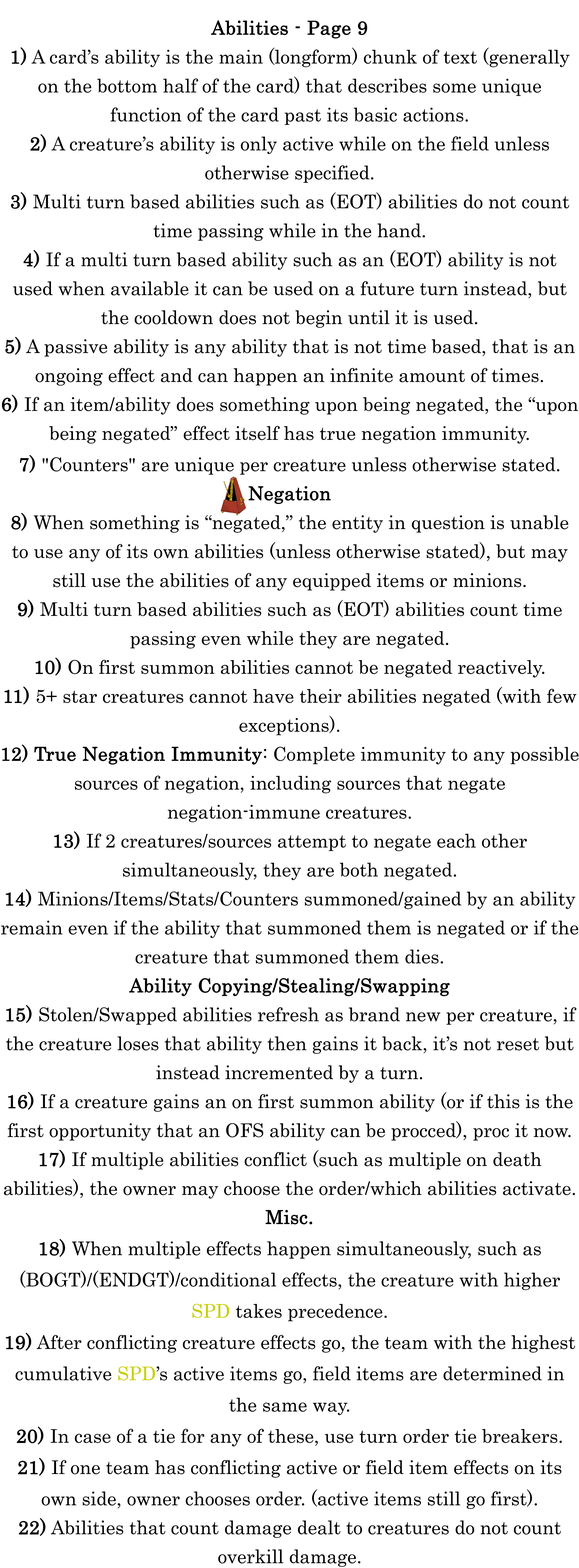
<style>
.page{position:relative;width:579px;height:1568px;background:#ffffff}
.page>*{position:absolute;margin:0}
.t1{font:32.2px/29px "Century";color:#000000}
.t2{font:32.2px/29px "Century";color:#000000;font-weight:bold}
.t3{font:32.2px/31.3px "Century";color:#000000}
.t4{font:32.2px/31.3px "Century";color:#c8cf00}
</style>
<div class="page">
<p class="t1" style="left:1px;top:20px;width:578px;height:1547px;text-align:center"><span class="t2">Abilities - Page 9<br>1)</span> A card’s ability is the main (longform) chunk of text (generally on the bottom half of the card) that describes some unique function of the card past its basic actions.<br><span class="t2">2)</span> A creature’s ability is only active while on the field unless otherwise specified.<br><span class="t2">3)</span> Multi turn based abilities such as (EOT) abilities do not count time passing while in the hand.<br><span class="t2">4)</span> If a multi turn based ability such as an (EOT) ability is not used when available it can be used on a future turn instead, but the cooldown does not begin until it is used.<br><span class="t2">5)</span> A passive ability is any ability that is not time based, that is an ongoing effect and can happen an infinite amount of times.<br><span class="t2">6)</span> If an item/ability does something upon being negated, the “upon being negated” effect itself has true negation immunity.<br><span class="t2">7)</span><span class="t3"> "Counters" are unique per creature unless otherwise stated.<br></span><span class="t2">Negation<br>8)</span> When something is “negated,” the entity in question is unable to use any of its own abilities (unless otherwise stated), but may still use the abilities of any equipped items or minions.<br><span class="t2">9)</span> Multi turn based abilities such as (EOT) abilities count time passing even while they are negated.<br><span class="t2">10)</span> On first summon abilities cannot be negated reactively.<br><span class="t2">11)</span> 5+ star creatures cannot have their abilities negated (with few exceptions).<br><span class="t2">12) True Negation Immunity</span>: Complete immunity to any possible sources of negation, including sources that negate negation-immune creatures.<br><span class="t2">13)</span> If 2 creatures/sources attempt to negate each other simultaneously, they are both negated.<br><span class="t2">14)</span> Minions/Items/Stats/Counters summoned/gained by an ability remain even if the ability that summoned them is negated or if the creature that summoned them dies. <br><span class="t2">Ability Copying/Stealing/Swapping<br>15)</span> Stolen/Swapped abilities refresh as brand new per creature, if the creature loses that ability then gains it back, it’s not reset but instead incremented by a turn.<br><span class="t2">16)</span> If a creature gains an on first summon ability (or if this is the first opportunity that an OFS ability can be procced), proc it now.<br><span class="t2">17)</span> If multiple abilities conflict (such as multiple on death abilities), the owner may choose the order/which abilities activate.<br><span class="t2">Misc.<br>18)</span><span class="t3"> When multiple effects happen simultaneously, such as (BOGT)/(ENDGT)/conditional effects, the creature with higher </span><span class="t4">SPD</span><span class="t3"> takes precedence.<br></span><span class="t2">19)</span><span class="t3"> After conflicting creature effects go, the team with the highest  cumulative </span><span class="t4">SPD</span><span class="t3">’s active items go, field items are determined in the same way.<br></span><span class="t2">20)</span><span class="t3"> In case of a tie for any of these, use turn order tie breakers.<br></span><span class="t2">21)</span><span class="t3"> If one team has conflicting active or field item effects on its own side, owner chooses order. (active items still go first).<br></span><span class="t2">22)</span> Abilities that count damage dealt to creatures do not count overkill damage.</p>
</div>
